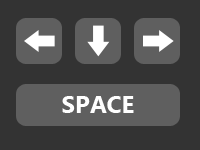
<style>
.page{position:relative;width:200px;height:150px;background:#333333}
.page>*{position:absolute;margin:0}
.t1{font:24px "SegoeUI-Bold";color:#ffffff}
</style>
<div class="page">
<p class="t1" style="left:62px;top:96px;width:72px;height:17px">SPACE</p>
</div>
